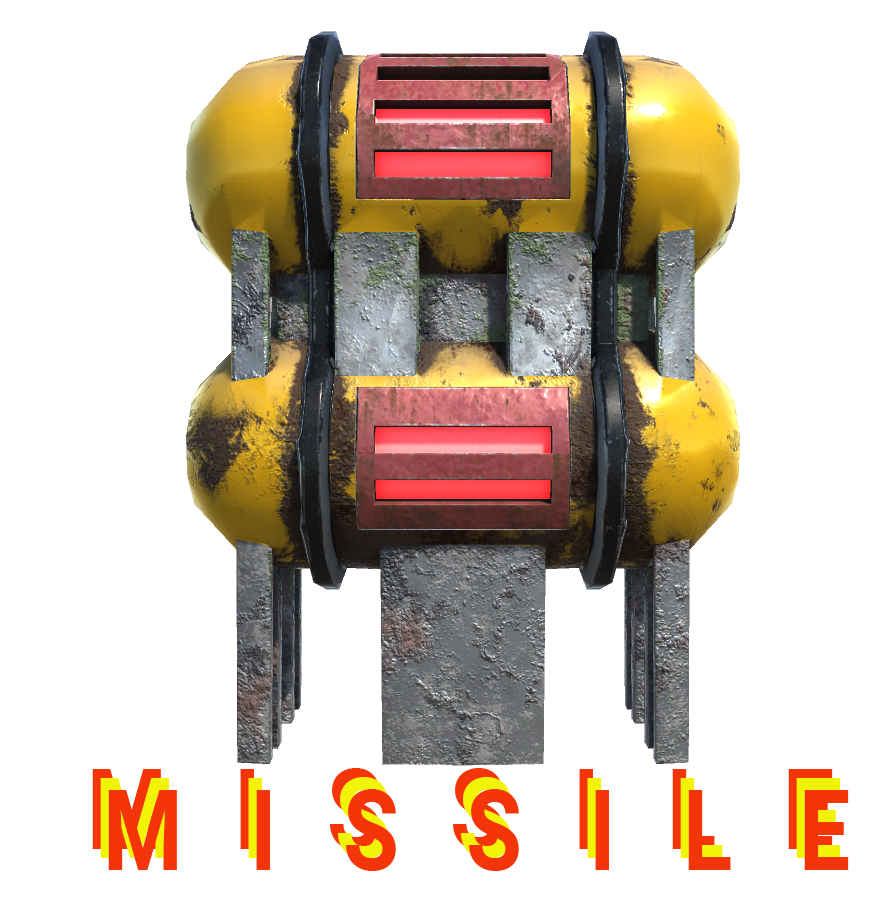
<style>
.page{position:relative;width:874px;height:898px;background:#ffffff}
.page>*{position:absolute;margin:0}
.t1{font:112px "Roboto-Bold";letter-spacing:0.74em;color:#f43509;scale:0.81 1}
.t2{font:112px "Roboto-Bold";letter-spacing:0.74em;scale:0.81 1}
</style>
<div class="page">
<p class="t1" style="left:92px;top:768px;width:741px;height:82px">MISSILE</p>
<p class="t2" style="left:100px;top:777px;width:741px;height:82px">MISSILE</p>
<p class="t1" style="left:108px;top:789px;width:741px;height:82px">MISSILE</p>
</div>
